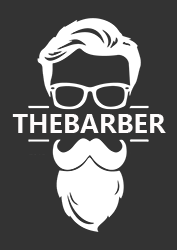
<style>
.page{position:relative;width:177px;height:250px;background:#333333}
.page>*{position:absolute;margin:0}
.t1{font:25px "MicrosoftYaHei-Bold";color:#fefcfc}
</style>
<div class="page">
<p class="t1" style="left:12px;top:114px;width:154px;height:19px">THEBARBER</p>
</div>
